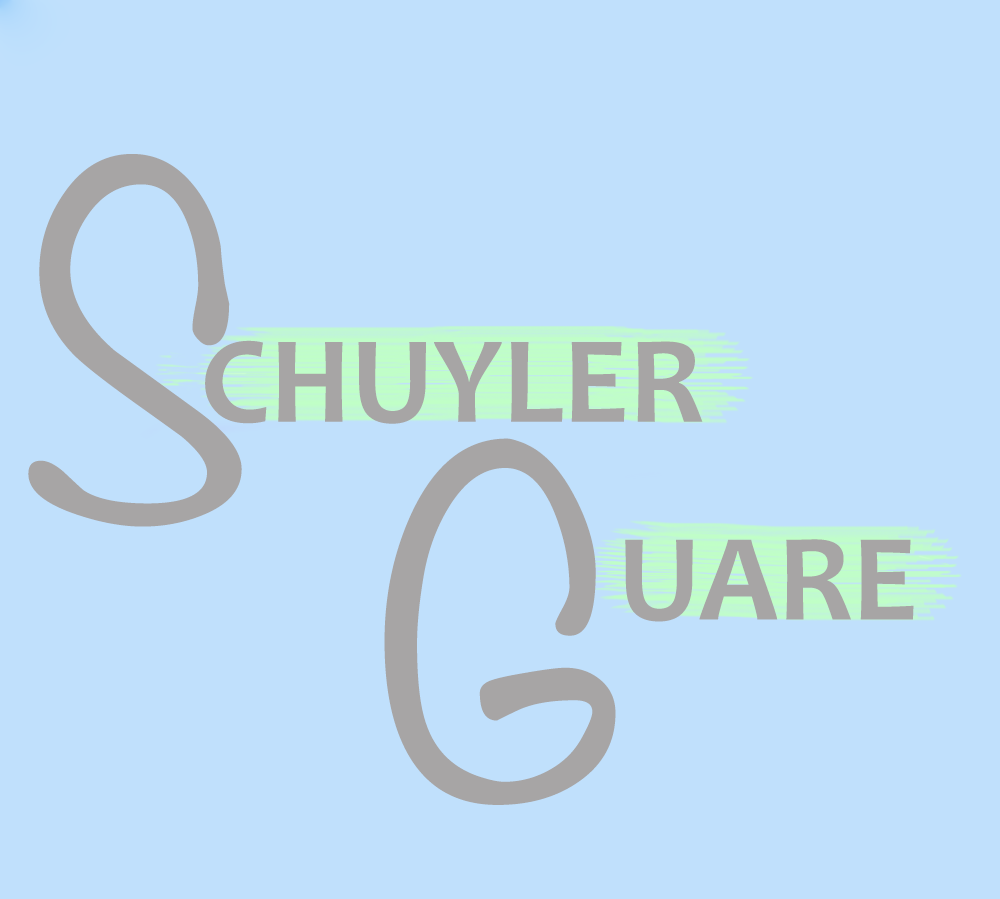
<style>
.page{position:relative;width:1000px;height:899px;background:#c0e0fc}
.page>*{position:absolute;margin:0}
.t1{font:416.7px "Noteworthy-Light";color:#a7a5a5}
.t2{font:125px "Candara-Bold";color:#a7a5a5}
</style>
<div class="page">
<p class="t1" style="left:28px;top:154px;width:214px;height:373px">S</p>
<p class="t2" style="left:205px;top:340px;width:498px;height:84px">CHUYLER</p>
<p class="t1" style="left:384px;top:438px;width:232px;height:367px">G</p>
<p class="t2" style="left:625px;top:539px;width:289px;height:83px">UARE</p>
</div>
